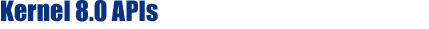
<style>
.page{position:relative;width:429px;height:29px;background:#ffffff}
.page>*{position:absolute;margin:0}
.t1{font:26px "Impact";color:#093282}
</style>
<div class="page">
<p class="t1" style="left:1px;top:0px;width:157px;height:22px">Kernel 8.0 APIs</p>
</div>
